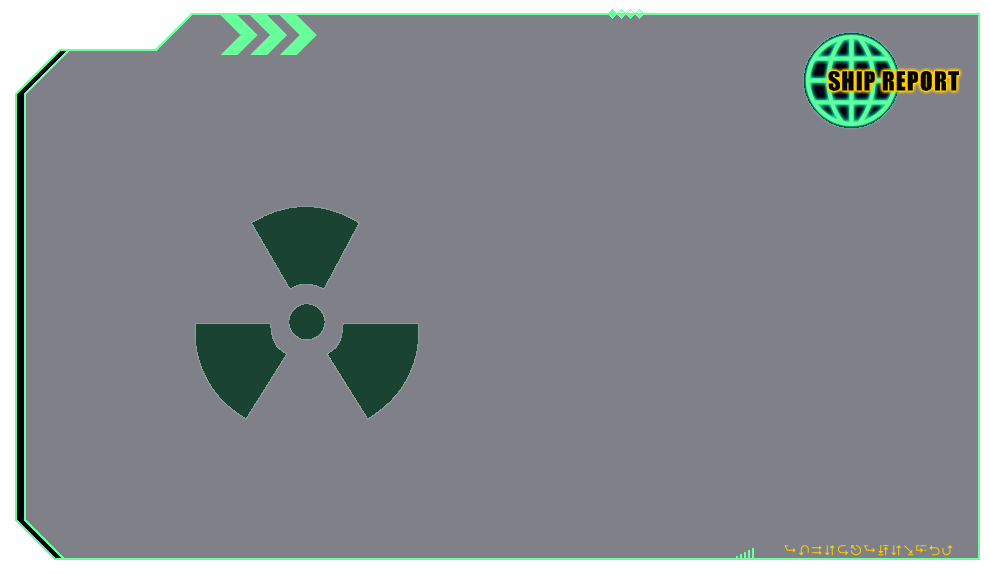
<style>
.page{position:relative;width:989px;height:575px;background:#7f8088}
.page>*{position:absolute;margin:0}
.t1{font:24.2px "Impact";letter-spacing:0.04em;color:#000000}
</style>
<div class="page">
<p class="t1" style="left:828px;top:71px;width:131px;height:20px">SHIP REPORT</p>
</div>
